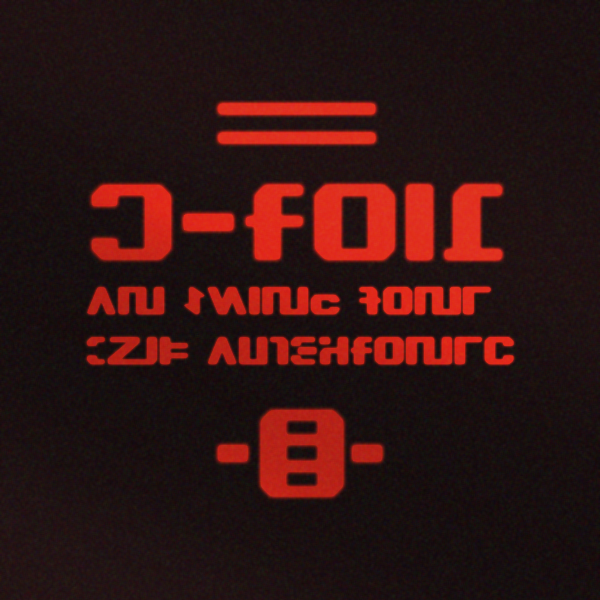
<style>
.page{position:relative;width:600px;height:600px}
.page>*{position:absolute;margin:0}
.t1{font:99px/99px "Incom-Beta";color:#cf1f11}
.t2{font:34.1px/49.5px "Incom-Beta";color:#cf1f11}
.t3{font:99px "Incom-Beta";color:#cf1f11}
</style>
<div class="page">
<p class="t1" style="left:93px;top:105px;width:407px;height:153px;text-align:center">===<br>S-Foil</p>
<p class="t2" style="left:88px;top:288px;width:425px;height:75px">An xwing font<br>by: AurekFonts</p>
<p class="t3" style="left:219px;top:411px;width:162px;height:84px">*#*</p>
</div>
